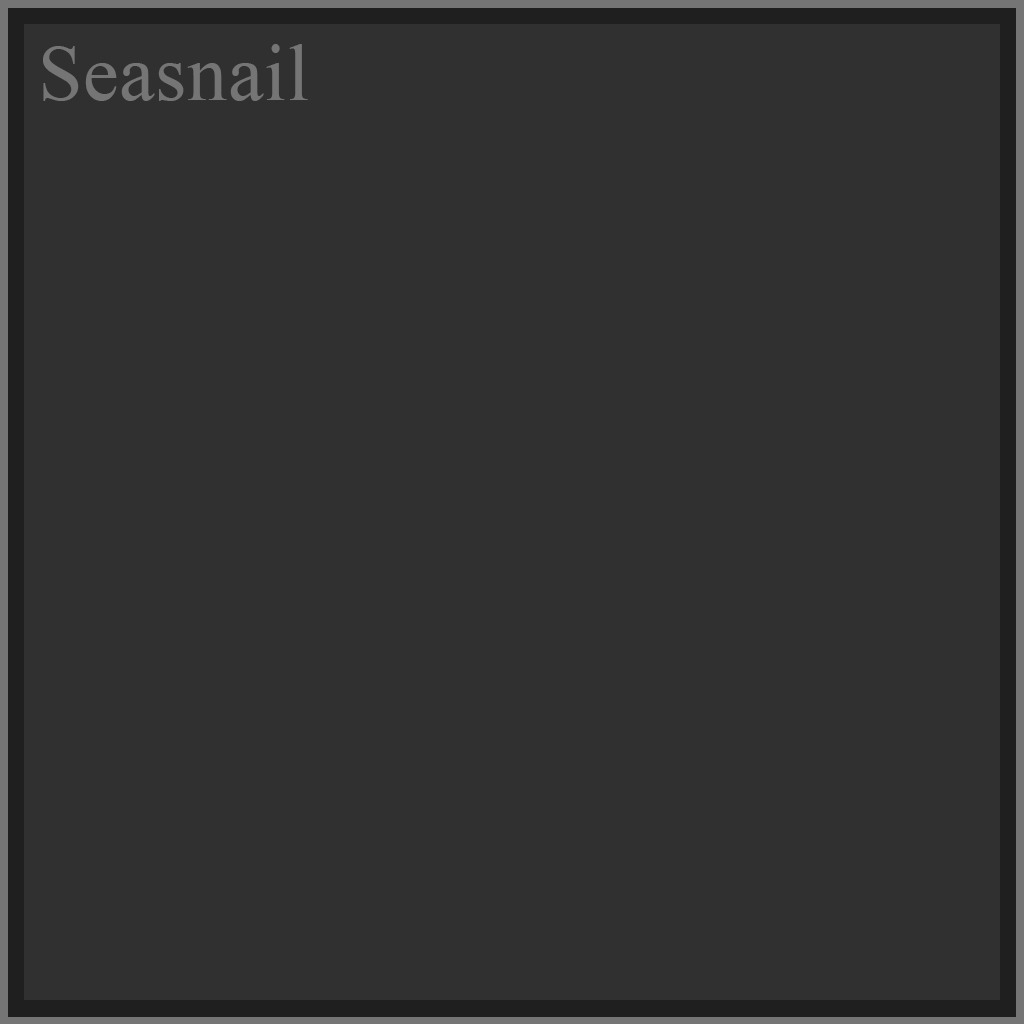
<style>
.page{position:relative;width:1024px;height:1024px;background:#303030}
.page>*{position:absolute;margin:0}
.t1{font:80px "TimesNewRomanPSMT";letter-spacing:0.009em;color:#757575}
</style>
<div class="page">
<p class="t1" style="left:43px;top:44px;width:265px;height:57px">Seasnail</p>
</div>
